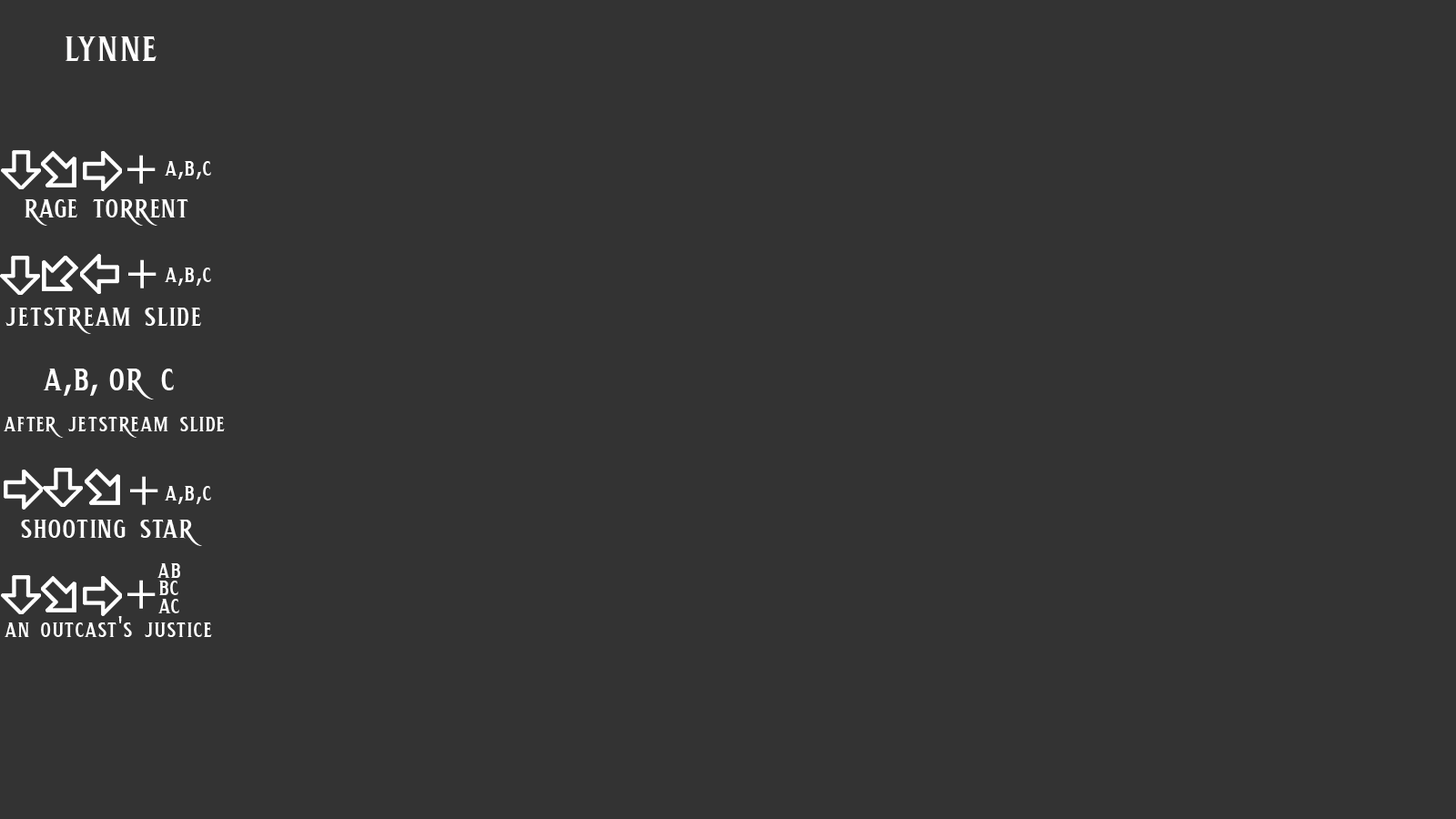
<style>
.page{position:relative;width:1456px;height:819px;background:#333333}
.page>*{position:absolute;margin:0}
.t1{font:53.1px "HemeraIIDEMO-Regular";color:#fffefe}
.t2{font:53.1px "MyriadPro-Regular";color:#ffffff}
.t3{font:30.3px "HemeraIIDEMO-Regular";color:#ffffff}
.t4{font:30.3px "MyriadPro-Regular";color:#ffffff}
.t5{font:37.9px "HemeraIIDEMO-Regular";color:#ffffff}
.t6{font:45.5px "HemeraIIDEMO-Regular";color:#ffffff}
.t7{font:45.5px "MyriadPro-Regular";color:#ffffff}
</style>
<div class="page">
<p class="t1" style="left:66px;top:36px;width:91px;height:25px">lynne</p>
<p class="t2" style="left:127px;top:155px;width:29px;height:29px">+</p>
<p class="t3" style="left:165px;top:161px;width:46px;height:18px">a<span class="t4">,</span>b<span class="t4">,</span>c</p>
<p class="t5" style="left:25px;top:199px;width:163px;height:27px">rage torrent</p>
<p class="t2" style="left:128px;top:259px;width:29px;height:29px">+</p>
<p class="t3" style="left:165px;top:268px;width:46px;height:18px">a<span class="t4">,</span>b<span class="t4">,</span>c</p>
<p class="t5" style="left:5px;top:308px;width:196px;height:26px">jetstream slide</p>
<p class="t6" style="left:43px;top:369px;width:131px;height:30px">a<span class="t7">,</span>b<span class="t7">, </span>or c</p>
<p class="t3" style="left:4px;top:417px;width:221px;height:21px">after jetstream slide</p>
<p class="t2" style="left:130px;top:476px;width:28px;height:29px">+</p>
<p class="t3" style="left:165px;top:486px;width:46px;height:18px">a<span class="t4">,</span>b<span class="t4">,</span>c</p>
<p class="t5" style="left:21px;top:520px;width:181px;height:26px">shooting star</p>
<p class="t3" style="left:157px;top:563px;width:23px;height:15px">ab</p>
<p class="t2" style="left:127px;top:580px;width:29px;height:29px">+</p>
<p class="t3" style="left:159px;top:581px;width:19px;height:14px">bc</p>
<p class="t3" style="left:158px;top:599px;width:21px;height:14px">ac</p>
<p class="t3" style="left:5px;top:616px;width:207px;height:21px">an outcast<span class="t4">'</span>s justice</p>
</div>
